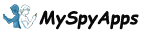
<style>
.page{position:relative;width:143px;height:33px;background:#ffffff}
.page>*{position:absolute;margin:0}
.t1{font:18px "ComicSansMS-BoldItalic";color:#0a0a0a}
</style>
<div class="page">
<p class="t1" style="left:39px;top:10px;width:100px;height:20px">MySpyApps</p>
</div>
